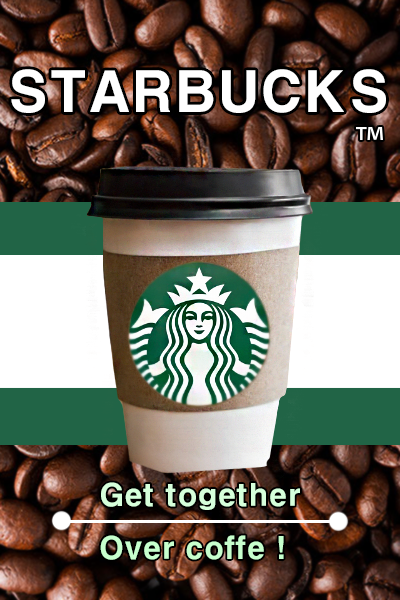
<style>
.page{position:relative;width:400px;height:600px}
.page>*{position:absolute;margin:0}
.t1{font:54.5px "HYgtrE";color:#ffffff}
.t2{font:30px "HYgtrE";color:#d6ffdb}
.t3{font:30px "HYgtrE";color:#c7ffcd}
</style>
<div class="page">
<p class="t1" style="left:11px;top:69px;width:375px;height:44px">STARBUCKS</p>
<p class="t2" style="left:100px;top:482px;width:200px;height:78px">Get together<br><span class="t3">Over coffe !</span></p>
</div>
